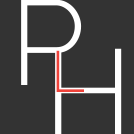
<style>
.page{position:relative;width:134px;height:134px;background:#333333}
.page>*{position:absolute;margin:0}
.t1{font:120px "Raleway-Light";color:#ffffff}
.t2{font:58px "Raleway-Light";color:#f0433a}
</style>
<div class="page">
<p class="t1" style="left:21px;top:0px;width:61px;height:85px">P</p>
<p class="t1" style="left:55px;top:48px;width:67px;height:86px">H</p>
<p class="t2" style="left:56px;top:50px;width:28px;height:42px">L</p>
</div>
